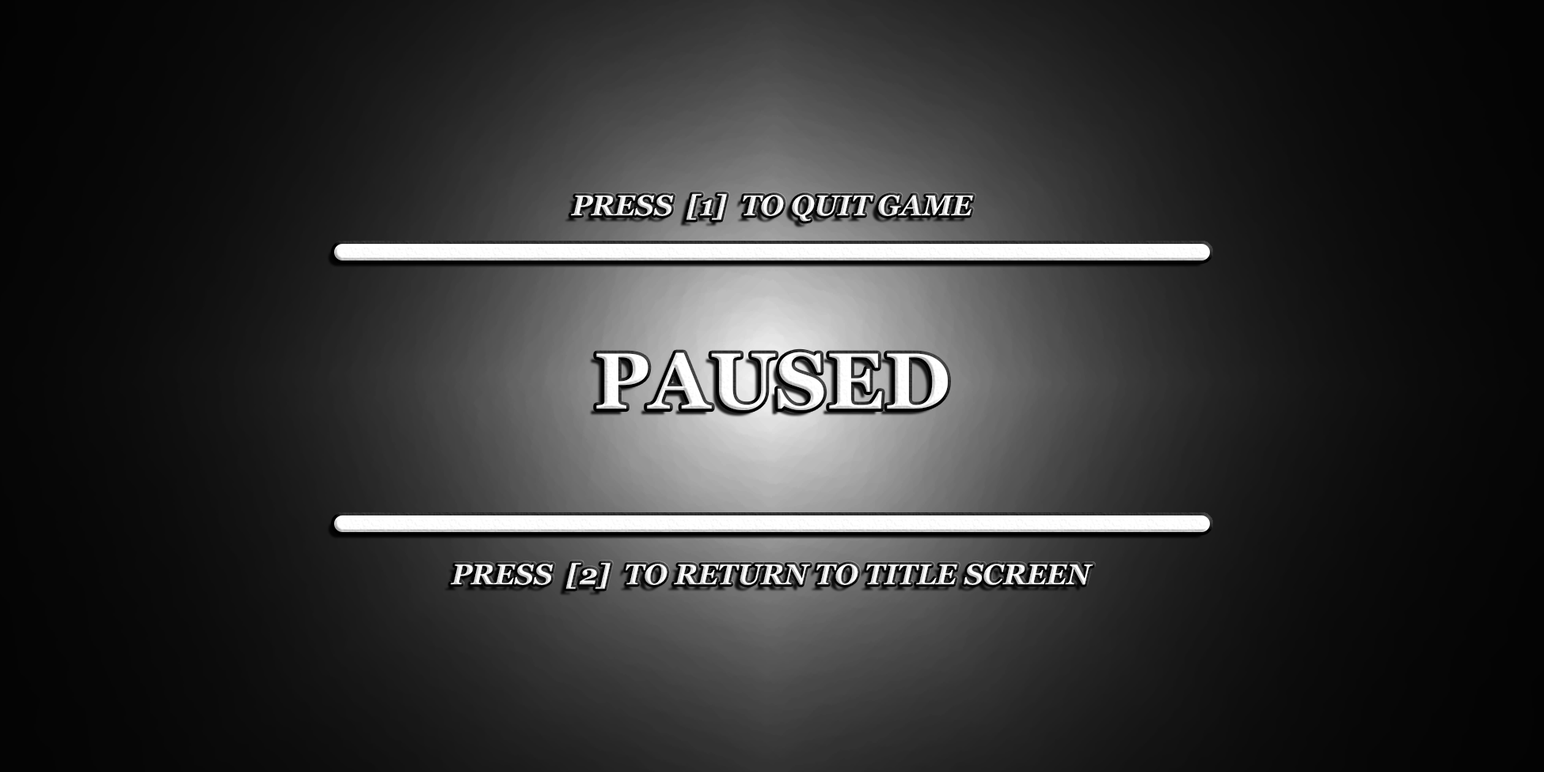
<style>
.page{position:relative;width:1544px;height:772px}
.page>*{position:absolute;margin:0}
.t1{font:28.5px "Georgia-BoldItalic";color:#ffffff}
.t2{font:79.2px "Georgia-Bold";color:#ffffff}
</style>
<div class="page">
<p class="t1" style="left:571px;top:194px;width:402px;height:28px">PRESS  [1]  TO QUIT GAME</p>
<p class="t2" style="left:596px;top:352px;width:352px;height:58px">PAUSED</p>
<p class="t1" style="left:451px;top:563px;width:642px;height:26px">PRESS  [2]  TO RETURN TO TITLE SCREEN</p>
</div>
